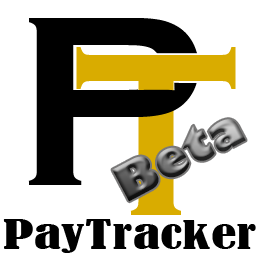
<style>
.page{position:relative;width:260px;height:260px;background:#ffffff}
.page>*{position:absolute;margin:0}
.t1{font:240px "CopperplateGothic-Bold";letter-spacing:0.005em;color:#d9ac00}
.t2{font:48px "GillSans-UltraBold";letter-spacing:0.005em}
.t3{font:37px "BernardMT-Condensed";letter-spacing:0.005em;color:#000000;scale:1.53 1}
</style>
<div class="page">
<p class="t1" style="left:76px;top:47px;width:160px;height:168px">T</p>
<p class="t2" style="left:112px;top:119px;width:134px;height:83px;rotate:-28deg">Beta</p>
<p class="t3" style="left:3px;top:219px;width:253px;height:34px">PayTracker</p>
</div>
